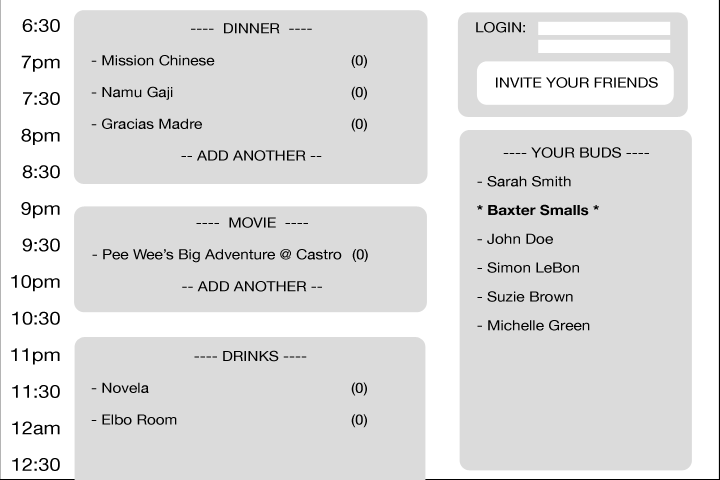
<style>
.page{position:relative;width:720px;height:480px;background:#dbdbdb}
.page>*{position:absolute;margin:0}
.t1{font:14px "HelveticaNeue";color:#000000;scale:1.1 1}
.t2{font:14px "HelveticaNeue-Bold";color:#000000;scale:1.1 1}
</style>
<div class="page">
<p class="t1" style="left:91px;top:23px;width:276px;height:138px;text-align:center">----  DINNER  ----<br>    - Mission Chinese    (0)<br>    - Namu Gaji            (0)<br>    - Gracias Madre    (0)<br>-- ADD ANOTHER --</p>
<p class="t1" style="left:476px;top:22px;width:49px;height:11px">LOGIN:</p>
<p class="t1" style="left:496px;top:77px;width:162px;height:11px">INVITE YOUR FRIENDS</p>
<p class="t1" style="left:477px;top:147px;width:172px;height:184px;text-align:center">---- YOUR BUDS ----<br>    - Sarah Smith<br>    <span class="t2">* Baxter Smalls *<br></span>    - John Doe<br>    - Simon LeBon<br>    - Suzie Brown<br>    - Michelle Green</p>
<p class="t1" style="left:92px;top:217px;width:276px;height:75px;text-align:center">----  MOVIE  ----<br>    - Pee Wee’s Big Adventure @ Castro (0)<br>-- ADD ANOTHER --</p>
<p class="t1" style="left:91px;top:350px;width:276px;height:78px;text-align:center">---- DRINKS ----<br>    - Novela      (0)<br>    - Elbo Room     (0)</p>
</div>
